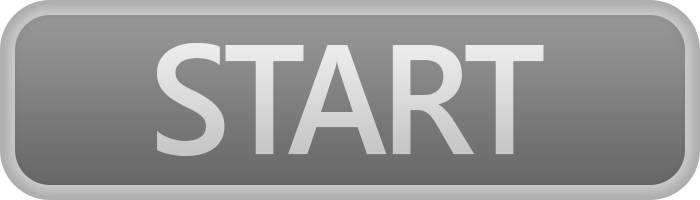
<style>
.page{position:relative;width:700px;height:200px}
.page>*{position:absolute;margin:0}
.t1{font:156.2px "SegoeUI-Semibold";letter-spacing:-0.05em;color:#dbdbdb;scale:0.96 1}
</style>
<div class="page">
<p class="t1" style="left:157px;top:43px;width:387px;height:113px">START</p>
</div>
